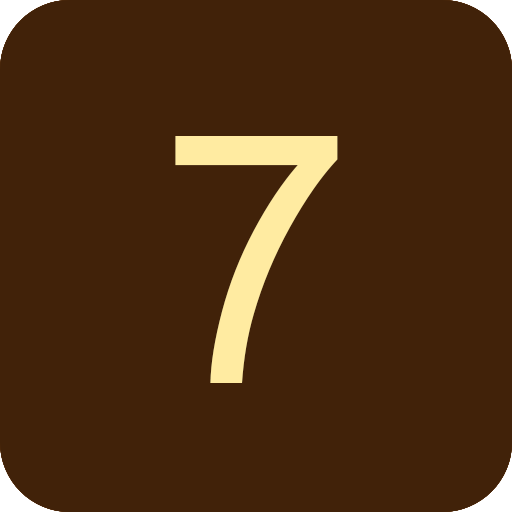
<style>
.page{position:relative;width:512px;height:512px;background:#412209}
.page>*{position:absolute;margin:0}
.t1{font:349px "ArialMT";color:#ffeba1}
</style>
<div class="page">
<p class="t1" style="left:175px;top:136px;width:163px;height:247px">7</p>
</div>
